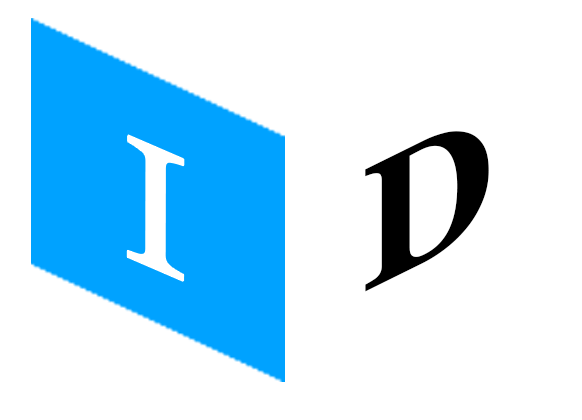
<style>
.page{position:relative;width:582px;height:420px;background:#ffffff}
.page>*{position:absolute;margin:0}
.t1{font:175.5px "Georgia";letter-spacing:-0.02em;color:#ffffff;scale:1.1 1}
.t2{font:176px "Georgia-Bold";letter-spacing:-0.02em;color:#000000}
</style>
<div class="page">
<p class="t1" style="left:127px;top:135px;width:57px;height:146px;rotate:23deg">I</p>
<p class="t2" style="left:365px;top:131px;width:124px;height:161px;rotate:-26deg">D</p>
</div>
